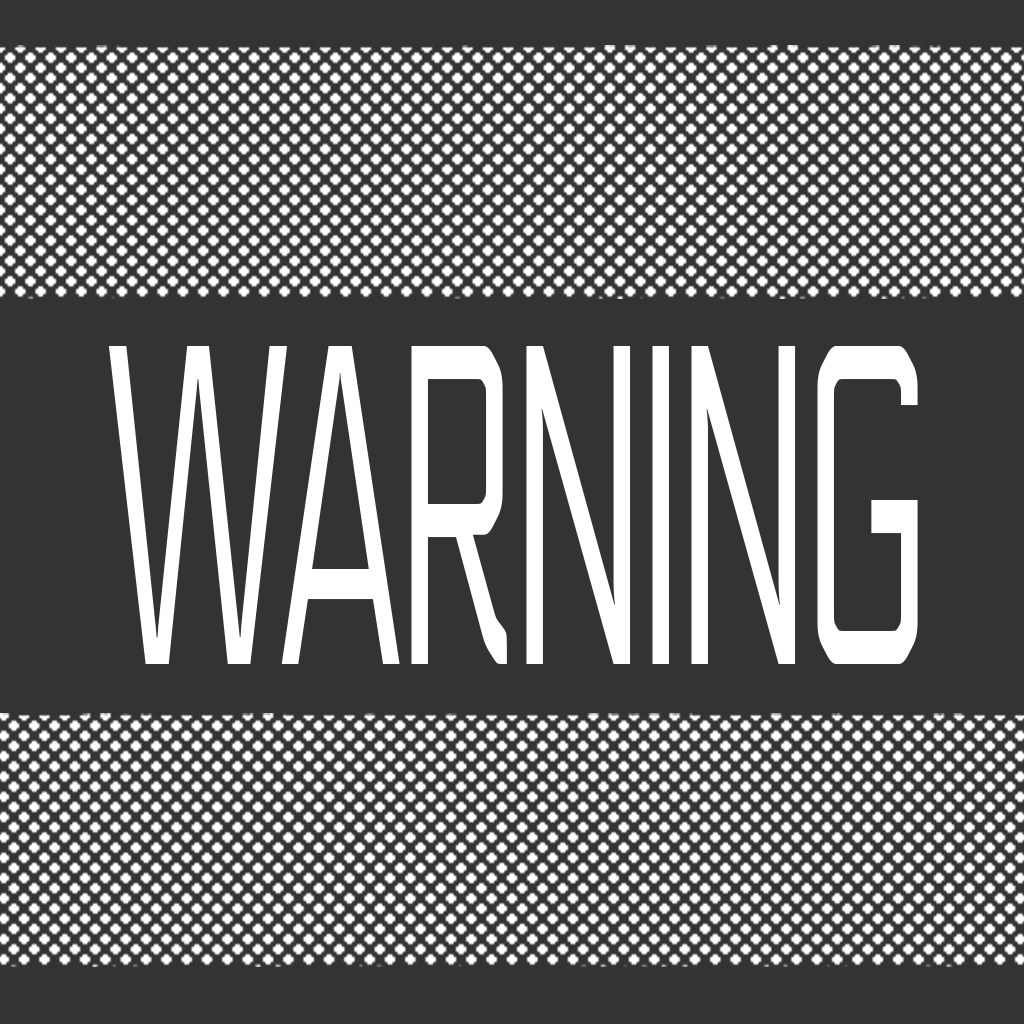
<style>
.page{position:relative;width:1024px;height:1024px;background:#333333}
.page>*{position:absolute;margin:0}
.t1{font:454.6px "Electrolize-Regular";letter-spacing:-0.085em;color:#ffffff;scale:0.43 1}
</style>
<div class="page">
<p class="t1" style="left:108px;top:346px;width:810px;height:318px">WARNING</p>
</div>
